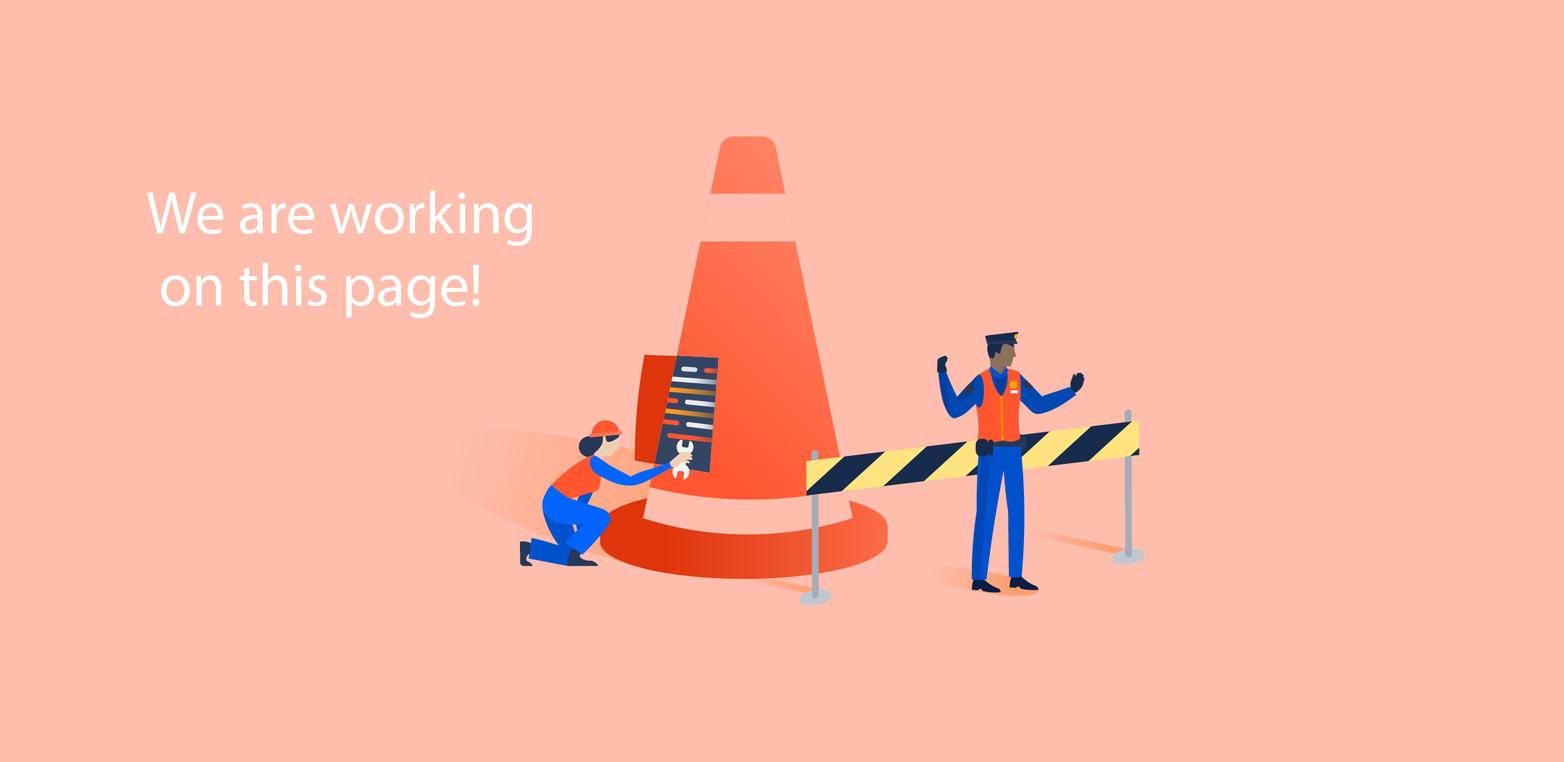
<style>
.page{position:relative;width:1564px;height:762px;background:#ffbdad}
.page>*{position:absolute;margin:0}
.t1{font:60.2px "MyriadPro-Regular";color:#ffffff}
</style>
<div class="page">
<p class="t1" style="left:147px;top:191px;width:385px;height:127px">We are working<br> on this page!</p>
</div>
